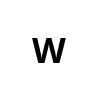
<style>
.page{position:relative;width:100px;height:100px;background:#ffffff}
.page>*{position:absolute;margin:0}
.t1{font:35px "OpenSans-Bold";color:#000000}
</style>
<div class="page">
<p class="t1" style="left:32px;top:38px;width:34px;height:25px">W</p>
</div>
